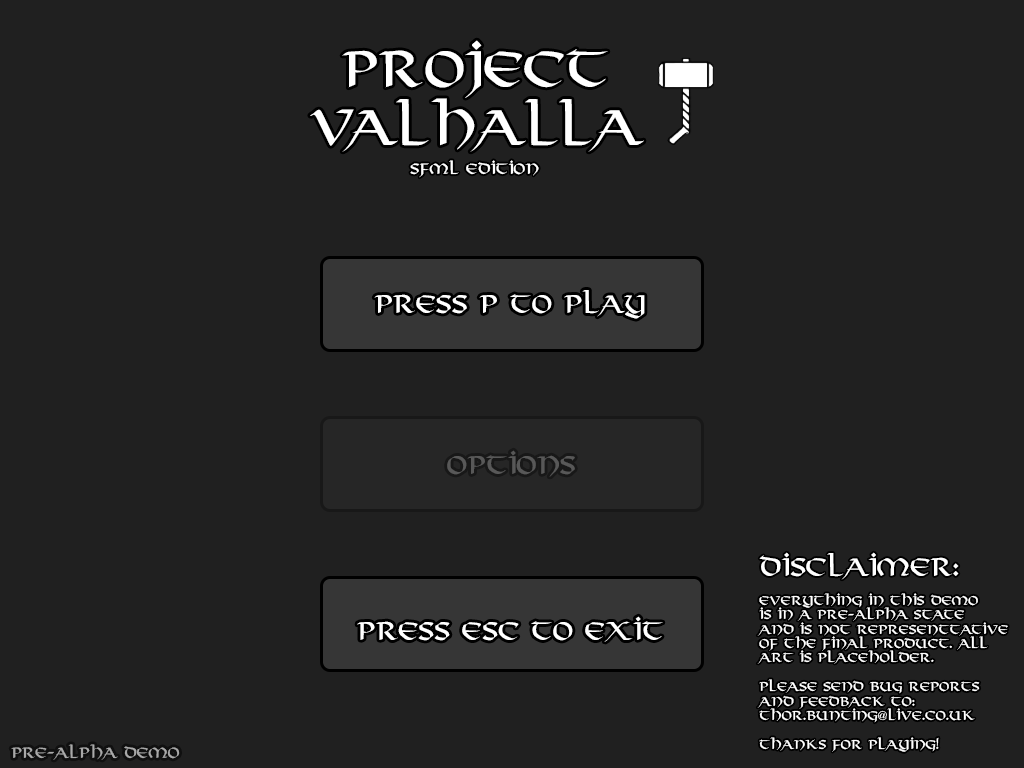
<style>
.page{position:relative;width:1024px;height:768px;background:#202020}
.page>*{position:absolute;margin:0}
.t1{font:48px "Viking-Normal";color:#ffffff}
.t2{font:14px "Viking-Normal";color:#ffffff}
.t3{font:24px "Viking-Normal";color:#ffffff}
.t4{font:24px "Viking-Normal";color:#585858}
.t5{font:12px "Viking-Normal";color:#ffffff}
.t6{font:14px "Viking-Normal";color:#a9a9a9}
</style>
<div class="page">
<p class="t1" style="left:310px;top:40px;width:334px;height:112px;text-align:center">Project<br>Valhalla</p>
<p class="t2" style="left:410px;top:160px;width:129px;height:18px">SFML Edition</p>
<p class="t3" style="left:374px;top:290px;width:271px;height:29px">Press P to Play</p>
<p class="t4" style="left:447px;top:450px;width:128px;height:27px">Options</p>
<p class="t5" style="left:757px;top:552px;width:251px;height:200px"><span class="t3">Disclaimer:<br></span><br>Everything in this demo<br>is in a pre-alpha state<br>and is not representtative<br>of the final product. All<br>art is placeholder.<br><br>Please send bug reports<br>and feedback to:<br>thor.bunting@live.co.uk<br><br>Thanks for playing!</p>
<p class="t3" style="left:357px;top:616px;width:306px;height:26px">Press ESC to Exit</p>
<p class="t6" style="left:11px;top:744px;width:169px;height:16px">Pre-Alpha Demo</p>
</div>
